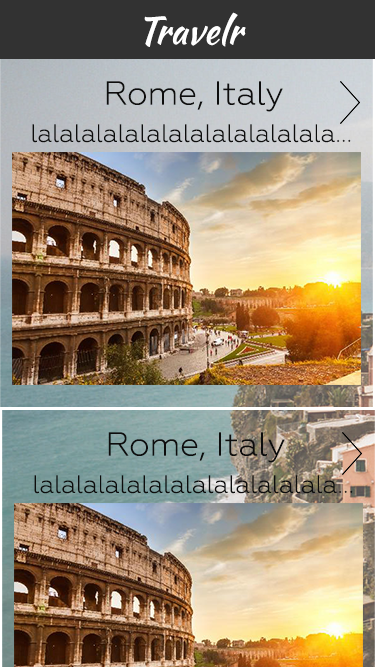
<style>
.page{position:relative;width:375px;height:667px}
.page>*{position:absolute;margin:0}
.t1{font:37.1px "KaushanScript-Regular";color:#ffffff}
.t2{font:33.3px "Geometria-Light";color:#0d0d0d}
.t3{font:25px "Geometria-Light";color:#0d0d0d}
</style>
<div class="page">
<p class="t1" style="left:144px;top:12px;width:102px;height:35px">Travelr</p>
<p class="t2" style="left:106px;top:81px;width:177px;height:31px">Rome, Italy</p>
<p class="t3" style="left:32px;top:124px;width:319px;height:19px">lalalalalalalalalalalalalala...</p>
<p class="t2" style="left:108px;top:432px;width:177px;height:31px">Rome, Italy</p>
<p class="t3" style="left:34px;top:475px;width:319px;height:19px">lalalalalalalalalalalalalala...</p>
</div>
